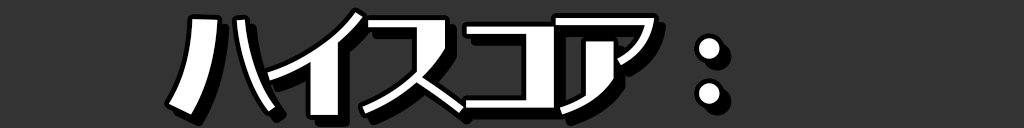
<style>
.page{position:relative;width:1024px;height:128px;background:#333333}
.page>*{position:absolute;margin:0}
.t1{font:116.7px "AB-lineboard_bold";letter-spacing:-0.18em;color:#ffffff}
.t2{font:116.7px "HGPSoeiKakugothicUB";letter-spacing:-0.18em;color:#ffffff}
</style>
<div class="page">
<p class="t1" style="left:169px;top:12px;width:551px;height:103px">ハイスコア <span class="t2">：</span></p>
</div>
